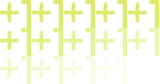
<style>
.page{position:relative;width:160px;height:84px;background:#ffffff}
.page>*{position:absolute;margin:0}
.t1{font:40px "Montserrat-Regular";color:#dceb6e}
.t2{font:40px "Montserrat-Regular";color:#e3ef8b}
.t3{font:40px "Montserrat-Regular";color:#e6f199}
.t4{font:40px "Montserrat-Regular";color:#eaf3a8}
.t5{font:40px "Montserrat-Regular";color:#edf5b6}
.t6{font:40px "Montserrat-Regular";color:#f1f7c5}
.t7{font:40px "Montserrat-Regular";color:#f4f9d3}
.t8{font:40px "Montserrat-Regular";color:#f8fbe2}
.t9{font:40px "Montserrat-Regular";color:#fbfdf0}
</style>
<div class="page">
<p class="t1" style="left:0px;top:0px;width:32px;height:28px">+1</p>
<p class="t1" style="left:32px;top:0px;width:32px;height:28px">+1</p>
<p class="t1" style="left:64px;top:0px;width:32px;height:28px">+1</p>
<p class="t1" style="left:96px;top:0px;width:32px;height:28px">+1</p>
<p class="t1" style="left:128px;top:0px;width:32px;height:28px">+1</p>
<p class="t1" style="left:0px;top:28px;width:32px;height:28px;opacity:0.9">+1</p>
<p class="t2" style="left:32px;top:28px;width:32px;height:28px">+1</p>
<p class="t3" style="left:64px;top:28px;width:32px;height:28px">+1</p>
<p class="t4" style="left:96px;top:28px;width:32px;height:28px">+1</p>
<p class="t5" style="left:128px;top:28px;width:32px;height:28px">+1</p>
<p class="t6" style="left:0px;top:56px;width:32px;height:28px">+1</p>
<p class="t7" style="left:32px;top:56px;width:32px;height:28px">+1</p>
<p class="t8" style="left:64px;top:56px;width:32px;height:28px">+1</p>
<p class="t9" style="left:96px;top:56px;width:32px;height:28px">+1</p>
</div>
